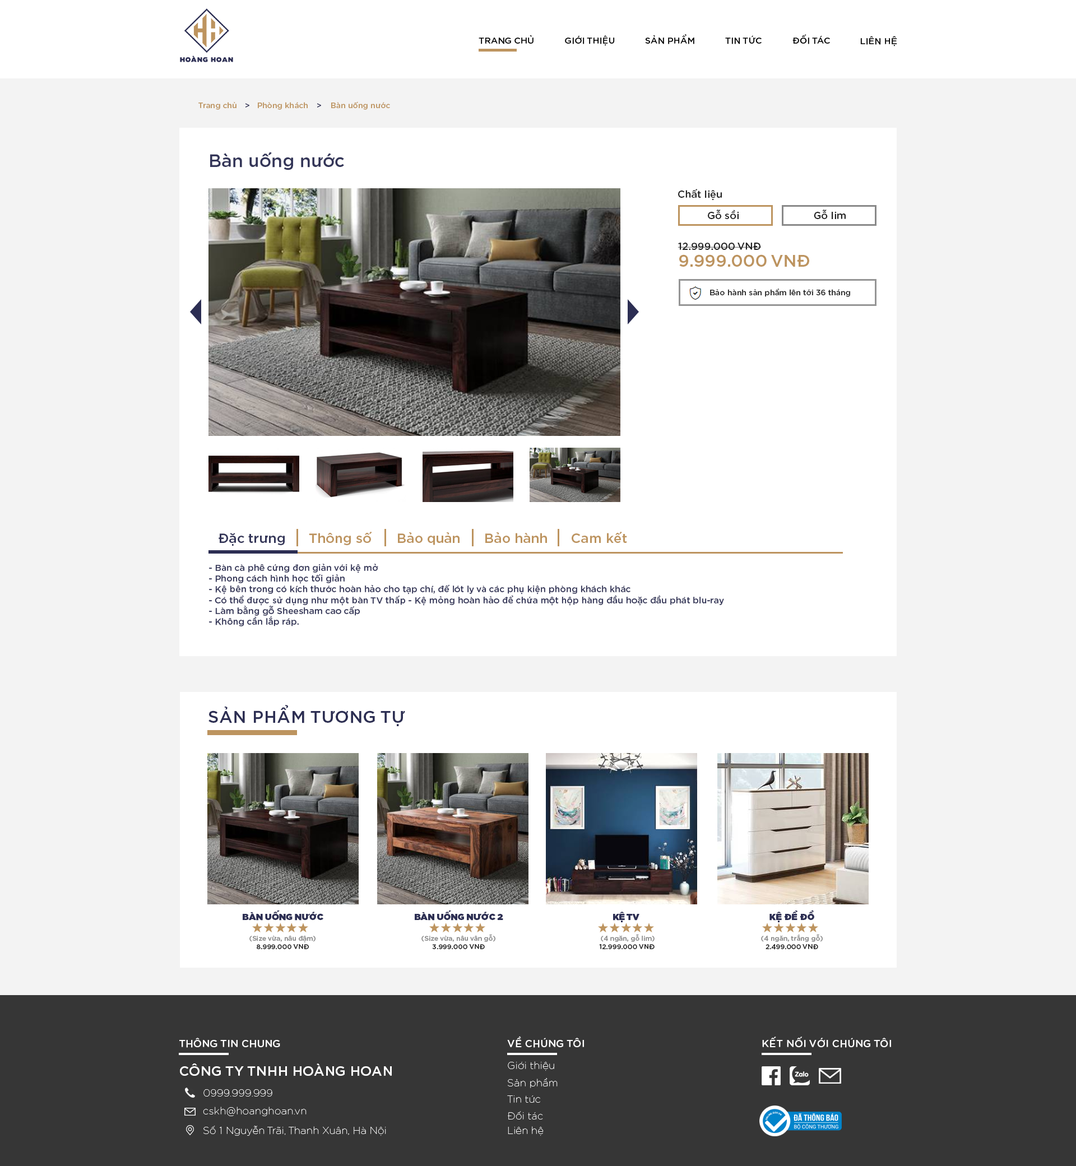
<style>
.page{position:relative;width:1076px;height:1166px;background:#f3f3f3}
.page>*{position:absolute;margin:0}
.t1{font:9px "iCielGotham-Medium";color:#000000;text-transform:uppercase}
.t2{font:7.8px "iCielGotham-Medium";color:#bd945f}
.t3{font:7.8px "iCielGotham-Medium";color:#2c2e53}
.t4{font:17.9px "iCielGotham-Medium";color:#343659}
.t5{font:10.1px "iCielGotham-Medium";color:#222222}
.t6{font:16.8px "iCielGotham-Medium";color:#bd945f}
.t7{font:7.8px "iCielGotham-Medium";color:#222222}
.t8{font:13.4px "iCielGotham-Medium";color:#343659}
.t9{font:13.4px "iCielGotham-Medium";color:#bd945f}
.t10{font:9px "iCielGotham-Medium";color:#343659}
.t11{font:17px "iCielGotham-Medium";letter-spacing:0.025em;color:#2c2e53;text-transform:uppercase}
.t12{font:9px "iCielGotham-Ultra";color:#2c2e53;text-transform:uppercase}
.t13{font:6.7px "iCielGotham-Medium";color:#888888}
.t14{font:6.8px "iCielGotham-Medium";color:#888888}
.t15{font:6.7px "iCielGotham-Medium";color:#222222}
.t16{font:6.8px "iCielGotham-Medium";color:#222222}
.t17{font:10.1px "iCielGotham-Medium";letter-spacing:0.025em;color:#ffffff}
.t18{font:10.1px "iCielGotham-Thin";letter-spacing:0.025em;color:#ffffff}
.t19{font:13.4px "iCielGotham-Medium";letter-spacing:0.025em;color:#ffffff}
</style>
<div class="page">
<p class="t1" style="left:479px;top:35px;width:54px;height:9px">trang chủ</p>
<p class="t1" style="left:565px;top:35px;width:50px;height:11px">gIớI thIệu</p>
<p class="t1" style="left:645px;top:34px;width:49px;height:10px">sản phẩm</p>
<p class="t1" style="left:725px;top:35px;width:36px;height:9px">tIn tức</p>
<p class="t1" style="left:792px;top:34px;width:38px;height:10px">đốI tác</p>
<p class="t1" style="left:860px;top:36px;width:37px;height:11px">lIên hệ</p>
<p class="t2" style="left:198px;top:102px;width:38px;height:8px">Trang chủ</p>
<p class="t2" style="left:258px;top:102px;width:50px;height:8px">Phòng khách</p>
<p class="t2" style="left:331px;top:101px;width:59px;height:9px">Bàn uống nước</p>
<p class="t3" style="left:245px;top:103px;width:4px;height:5px">&gt;</p>
<p class="t3" style="left:317px;top:103px;width:4px;height:5px">&gt;</p>
<p class="t4" style="left:210px;top:152px;width:134px;height:18px">Bàn uống nước</p>
<p class="t5" style="left:678px;top:189px;width:44px;height:11px">Chất liệu</p>
<p class="t5" style="left:708px;top:210px;width:31px;height:9px">Gỗ sồi</p>
<p class="t5" style="left:814px;top:210px;width:32px;height:9px">Gỗ lim</p>
<p class="t5" style="left:677px;top:243px;width:84px;height:7px">12.999.000 VNĐ</p>
<p class="t6" style="left:679px;top:254px;width:130px;height:13px">9.999.000 VNĐ</p>
<p class="t7" style="left:710px;top:289px;width:140px;height:8px">Bảo hành sản phẩm lên tới 36 tháng</p>
<p class="t8" style="left:219px;top:533px;width:66px;height:13px">Đặc trưng</p>
<p class="t9" style="left:309px;top:531px;width:63px;height:14px">Thông số</p>
<p class="t9" style="left:398px;top:532px;width:61px;height:13px">Bảo quản</p>
<p class="t9" style="left:485px;top:532px;width:62px;height:11px">Bảo hành</p>
<p class="t9" style="left:572px;top:531px;width:55px;height:12px">Cam kết</p>
<p class="t10" style="left:209px;top:564px;width:515px;height:62px;text-align:justify">- Bàn cà phê cứng đơn giản với kệ mở<br>- Phong cách hình học tối giản<br>- Kệ bên trong có kích thước hoàn hảo cho tạp chí, đế lót ly và các phụ kiện phòng khách khác<br>- Có thể được sử dụng như một bàn TV thấp - Kệ mỏng hoàn hảo để chứa một hộp hàng đầu hoặc đầu phát blu-ray<br>- Làm bằng gỗ Sheesham cao cấp<br>- Không cần lắp ráp.</p>
<p class="t11" style="left:208px;top:705px;width:197px;height:21px">sản phẩm tương tự</p>
<p class="t12" style="left:243px;top:910px;width:80px;height:11px">Bàn uống nước</p>
<p class="t12" style="left:415px;top:910px;width:88px;height:11px">BÀN uống nước 2</p>
<p class="t12" style="left:613px;top:912px;width:26px;height:10px">kệ TV</p>
<p class="t12" style="left:769px;top:910px;width:45px;height:12px">kệ để đồ</p>
<p class="t13" style="left:249px;top:935px;width:66px;height:7px">(Size vừa, nâu đậm)</p>
<p class="t13" style="left:421px;top:934px;width:74px;height:8px">(Size vừa, nâu vân gỗ)</p>
<p class="t13" style="left:601px;top:934px;width:53px;height:8px">(4 ngăn, gỗ lim)</p>
<p class="t14" style="left:761px;top:934px;width:62px;height:8px">(4 ngăn, trắng gỗ)</p>
<p class="t15" style="left:257px;top:944px;width:52px;height:5px">8.999.000 VNĐ</p>
<p class="t15" style="left:432px;top:944px;width:53px;height:5px">3.999.000 VNĐ</p>
<p class="t15" style="left:599px;top:944px;width:55px;height:5px">12.999.000 VNĐ</p>
<p class="t16" style="left:765px;top:944px;width:53px;height:6px">2.499.000 VNĐ</p>
<p class="t17" style="left:179px;top:1038px;width:101px;height:10px">THÔNG TIN CHUNG</p>
<p class="t17" style="left:507px;top:1036px;width:77px;height:12px">VỀ CHÚNG TÔI</p>
<p class="t17" style="left:762px;top:1037px;width:129px;height:11px">KẾT NỐI VỚI CHÚNG TÔI</p>
<p class="t18" style="left:508px;top:1061px;width:46px;height:10px">Giới thiệu</p>
<p class="t19" style="left:180px;top:1064px;width:212px;height:12px">CÔNG TY TNHH HOÀNG HOAN</p>
<p class="t18" style="left:508px;top:1078px;width:50px;height:10px">Sản phẩm</p>
<p class="t18" style="left:203px;top:1089px;width:69px;height:8px">0999.999.999</p>
<p class="t18" style="left:507px;top:1095px;width:33px;height:8px">Tin tức</p>
<p class="t18" style="left:203px;top:1107px;width:104px;height:9px">cskh@hoanghoan.vn</p>
<p class="t18" style="left:508px;top:1111px;width:35px;height:9px">Đối tác</p>
<p class="t18" style="left:203px;top:1126px;width:183px;height:10px">Số 1 Nguyễn Trãi, Thanh Xuân, Hà Nội</p>
<p class="t18" style="left:508px;top:1126px;width:36px;height:10px">Liên hệ</p>
</div>
